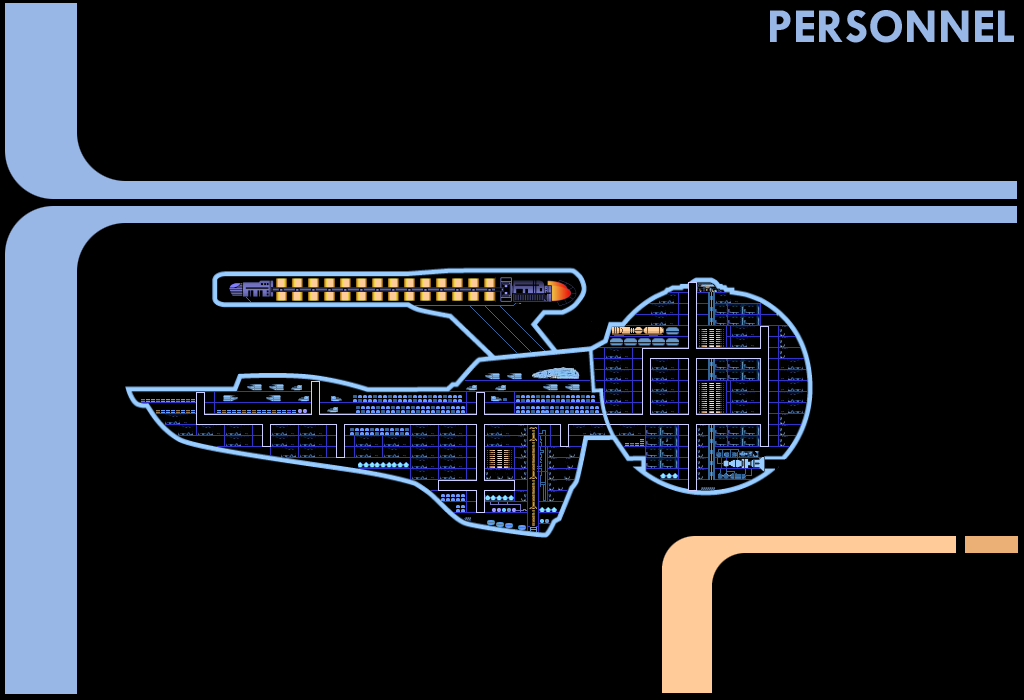
<style>
.page{position:relative;width:1024px;height:700px;background:#000000}
.page>*{position:absolute;margin:0}
.t1{font:70px "TwCenMT-Bold";color:#98b7e6;font-variant:small-caps}
</style>
<div class="page">
<p class="t1" style="left:770px;top:10px;width:244px;height:33px">personnel</p>
</div>
